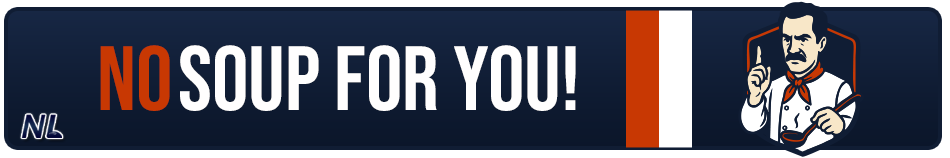
<style>
.page{position:relative;width:950px;height:158px}
.page>*{position:absolute;margin:0}
.t1{font:91.1px "BebasNeue-Regular";color:#fffefe;text-transform:uppercase}
.t2{font:91.1px "BebasNeue-Regular";color:#c83803;text-transform:uppercase}
</style>
<div class="page">
<p class="t1" style="left:100px;top:45px;width:476px;height:66px"><span class="t2">No </span>Soup For You!</p>
</div>
